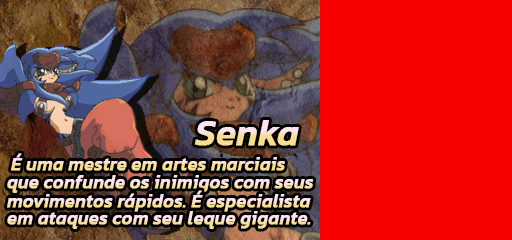
<style>
.page{position:relative;width:512px;height:240px;background:#f80000}
.page>*{position:absolute;margin:0}
.t1{font:36px "Kanit-MediumItalic";font-weight:bold}
.t2{font:18px "Kanit-MediumItalic";font-weight:bold}
</style>
<div class="page">
<p class="t1" style="left:194px;top:120px;width:105px;height:26px">Senka</p>
<p class="t2" style="left:11px;top:153px;width:274px;height:18px">É uma mestre em artes marciais</p>
<p class="t2" style="left:7px;top:175px;width:307px;height:18px">que confunde os inimigos com seus</p>
<p class="t2" style="left:7px;top:190px;width:304px;height:22px">movimentos rápidos. É especialista</p>
<p class="t2" style="left:7px;top:211px;width:304px;height:18px">em ataques com seu leque gigante.</p>
</div>
